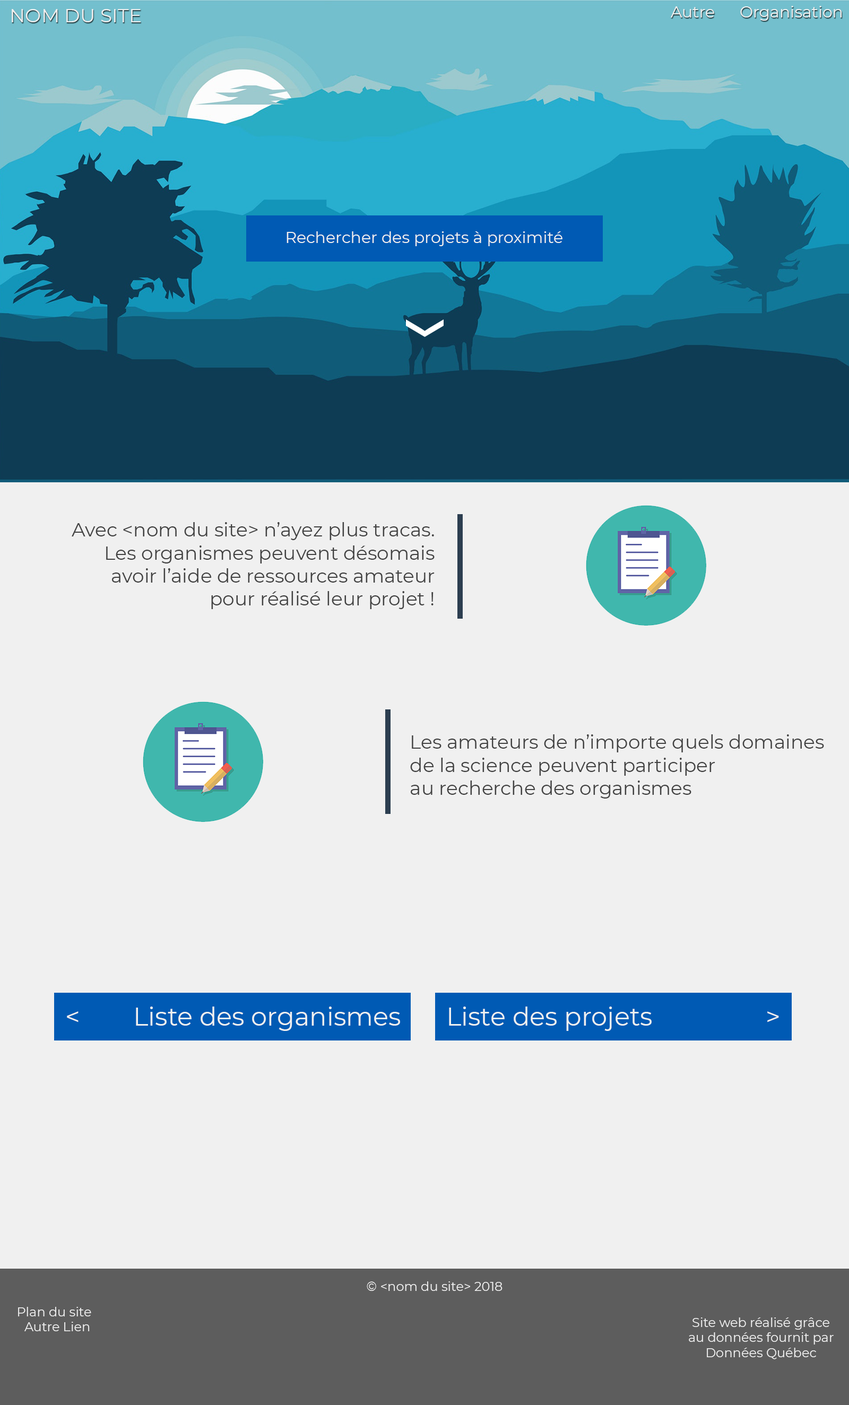
<style>
.page{position:relative;width:849px;height:1405px;background:#f0f0f0}
.page>*{position:absolute;margin:0}
.t1{font:15.9px "Montserrat-Regular";color:#f0f0f0}
.t2{font:19.1px "Montserrat-Regular";color:#f0f0f0}
.t3{font:19.1px "Montserrat-Regular";color:#414141}
.t4{font:25.5px "Montserrat-Regular";color:#f0f0f0}
.t5{font:12.7px "Montserrat-Regular";color:#f0f0f0}
</style>
<div class="page">
<p class="t1" style="left:740px;top:6px;width:102px;height:15px">Organisation</p>
<p class="t2" style="left:12px;top:9px;width:129px;height:13px">NOM DU SITE</p>
<p class="t1" style="left:671px;top:6px;width:43px;height:12px">Autre</p>
<p class="t1" style="left:286px;top:231px;width:276px;height:15px">Rechercher des projets à proximité</p>
<p class="t3" style="left:72px;top:522px;width:362px;height:87px;text-align:right">Avec &lt;nom du site&gt; n’ayez plus tracas.<br>Les organismes peuvent désomais<br>avoir l’aide de ressources amateur<br>pour réalisé leur projet !</p>
<p class="t3" style="left:410px;top:734px;width:414px;height:64px">Les amateurs de n’importe quels domaines<br>de la science peuvent participer<br>au recherche des organismes</p>
<p class="t4" style="left:67px;top:1006px;width:333px;height:25px">&lt;        Liste des organismes</p>
<p class="t4" style="left:449px;top:1006px;width:330px;height:25px">Liste des projets                 &gt;</p>
<p class="t5" style="left:367px;top:1281px;width:135px;height:10px">© &lt;nom du site&gt; 2018</p>
<p class="t5" style="left:18px;top:1307px;width:73px;height:9px">Plan du site</p>
<p class="t5" style="left:24px;top:1322px;width:66px;height:9px">Autre Lien</p>
<p class="t5" style="left:689px;top:1317px;width:144px;height:42px;text-align:center">Site web réalisé grâce<br>au données fournit par<br>Données Québec</p>
</div>
